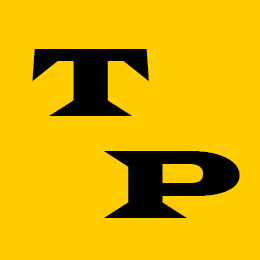
<style>
.page{position:relative;width:260px;height:260px;background:#ffcc00}
.page>*{position:absolute;margin:0}
.t1{font:100px "LatinWide";color:#000000}
</style>
<div class="page">
<p class="t1" style="left:32px;top:49px;width:117px;height:67px">T</p>
<p class="t1" style="left:104px;top:151px;width:136px;height:67px">P</p>
</div>
